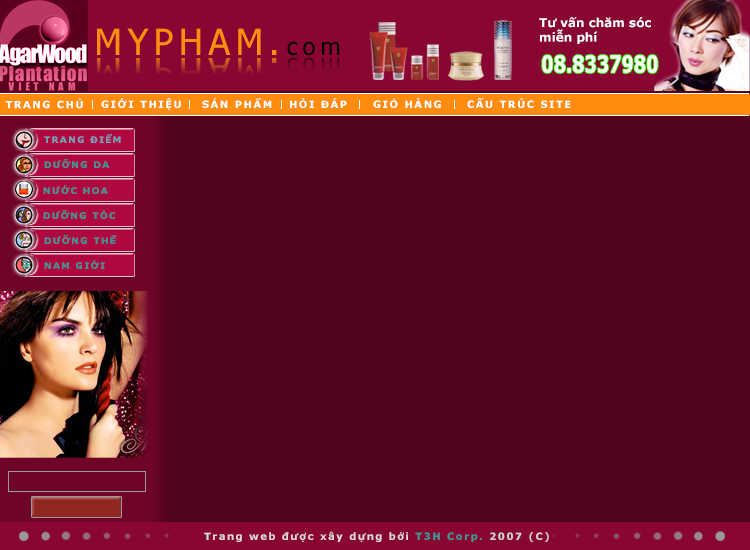
<style>
.page{position:relative;width:750px;height:550px;background:#52031e}
.page>*{position:absolute;margin:0}
.t1{font:12px "Verdana-Bold";color:#ffffff}
.t2{font:36px "Tahoma";letter-spacing:0.15em;color:#ff8b0f}
.t3{font:36px "Tahoma";letter-spacing:0.2em;color:#ff8b0f}
.t4{font:24px "Tahoma";letter-spacing:0.2em;color:#010101}
.t5{font:36px "Tahoma";letter-spacing:0.15em}
.t6{font:36px "Tahoma";letter-spacing:0.2em}
.t7{font:24px "Tahoma";letter-spacing:0.2em}
.t8{font:23.9px "Verdana-Bold";color:#ffffff;scale:0.73 1}
.t9{font:10px "Verdana-Bold";letter-spacing:0.15em;color:#ffffff}
.t10{font:10px "Verdana-Bold";letter-spacing:0.15em;color:#fafefe}
.t11{font:9px "Verdana-Bold";letter-spacing:0.15em;color:#71a3be}
.t12{font:9px "Verdana-Bold";letter-spacing:0.15em;color:#339999}
.t13{font:10px "Verdana-Bold";letter-spacing:0.15em;color:#dadada}
.t14{font:10px "Verdana-Bold";letter-spacing:0.15em;color:#339999}
.t15{font:10px "Verdana-Bold";letter-spacing:0.15em;color:#d0d0d0}
</style>
<div class="page">
<p class="t1" style="left:539px;top:17px;width:112px;height:27px">Tư vấn chăm sóc <br>miễn phí</p>
<p class="t2" style="left:97px;top:28px;width:243px;height:28px">MYPHAM<span class="t3">.</span><span class="t4">com</span></p>
<p class="t5" style="left:97px;top:57px;width:243px;height:28px">MYPHAM<span class="t6">.</span><span class="t7">com</span></p>
<p class="t8" style="left:542px;top:55px;width:116px;height:18px">08.8337980</p>
<p class="t9" style="left:5px;top:98px;width:78px;height:11px">TRANG CHỦ</p>
<p class="t10" style="left:101px;top:98px;width:80px;height:12px">GIỚI THIỆU</p>
<p class="t9" style="left:202px;top:98px;width:70px;height:10px">SẢN PHẨM</p>
<p class="t9" style="left:290px;top:98px;width:57px;height:10px">HỎI ĐÁP</p>
<p class="t9" style="left:373px;top:98px;width:68px;height:10px">GIỎ HÀNG</p>
<p class="t9" style="left:467px;top:98px;width:104px;height:10px">CẤU TRÚC SITE</p>
<p class="t11" style="left:44px;top:134px;width:77px;height:9px">TRANG ĐIỂM</p>
<p class="t12" style="left:44px;top:159px;width:66px;height:9px">DƯỠNG DA</p>
<p class="t12" style="left:43px;top:185px;width:65px;height:9px">NƯỚC HOA</p>
<p class="t12" style="left:43px;top:210px;width:72px;height:9px">DƯỠNG TÓC</p>
<p class="t12" style="left:44px;top:235px;width:73px;height:9px">DƯỠNG THỂ</p>
<p class="t12" style="left:44px;top:260px;width:61px;height:9px">NAM GIỚI</p>
<p class="t13" style="left:204px;top:531px;width:345px;height:11px">Trang web được xây dựng bởi <span class="t14">T3H Corp. </span><span class="t15">2007 (C)</span></p>
</div>
